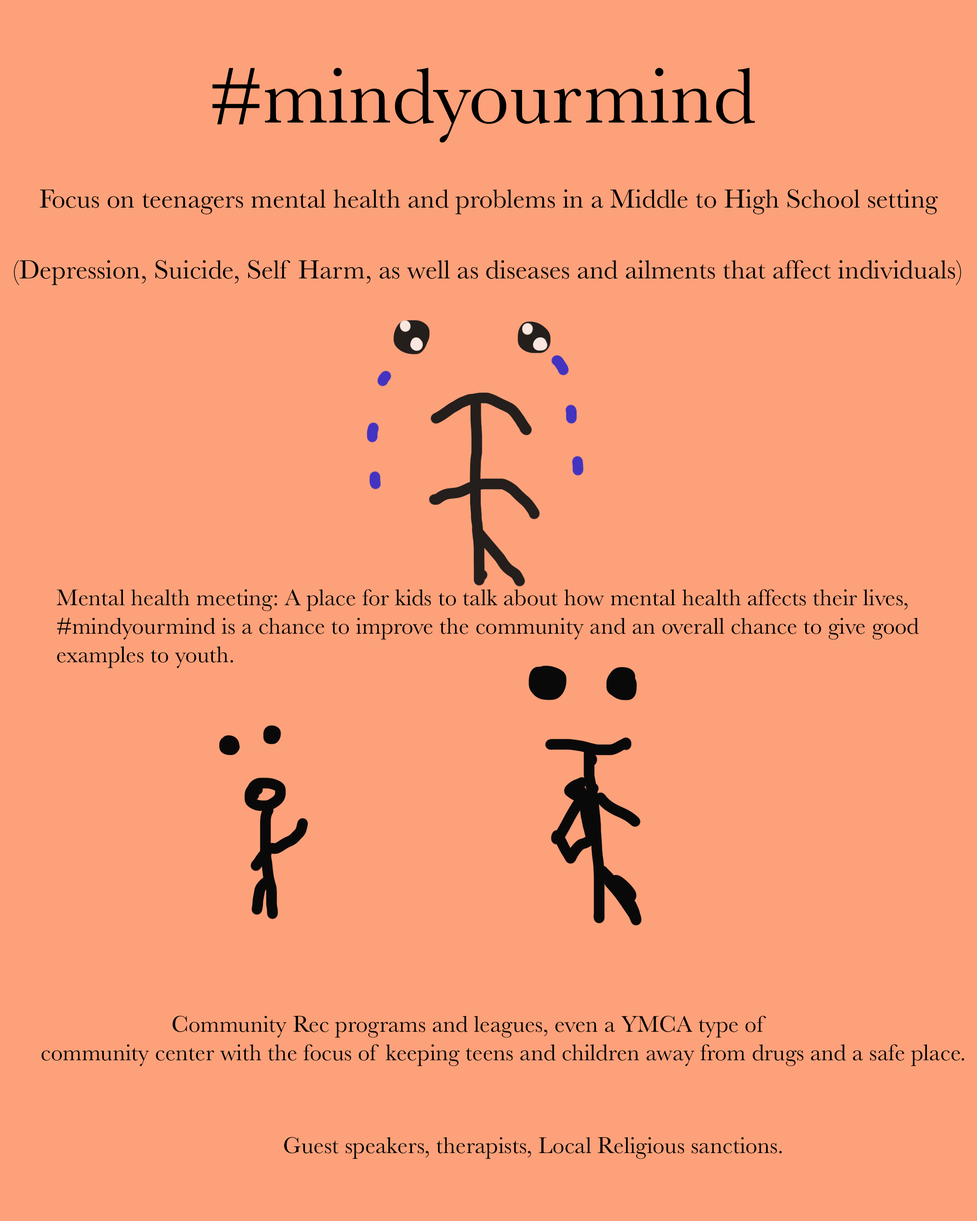
<style>
.page{position:relative;width:977px;height:1221px;background:#fda17a}
.page>*{position:absolute;margin:0}
.t1{font:81.4px "Baskerville";color:#000000}
.t2{font:27.1px "Baskerville";color:#000000}
.t3{font:23.7px "Baskerville";color:#000000}
</style>
<div class="page">
<p class="t1" style="left:212px;top:68px;width:543px;height:75px">#mindyourmind</p>
<p class="t2" style="left:39px;top:189px;width:899px;height:25px">Focus on teenagers mental health and problems in a Middle to High School setting</p>
<p class="t2" style="left:14px;top:260px;width:947px;height:25px">(Depression, Suicide, Self Harm, as well as diseases and ailments that affect individuals)</p>
<p class="t3" style="left:57px;top:589px;width:862px;height:79px">Mental health meeting: A place for kids to talk about how mental health affects their lives, <br>#mindyourmind is a chance to improve the community and an overall chance to give good <br>examples to youth.</p>
<p class="t3" style="left:42px;top:1015px;width:922px;height:51px"><span class="t2"><br></span>                      Community Rec programs and leagues, even a YMCA type of <br>community center with the focus of keeping teens and children away from drugs and a safe place.</p>
<p class="t3" style="left:284px;top:1137px;width:498px;height:22px">Guest speakers, therapists, Local Religious sanctions.</p>
</div>
